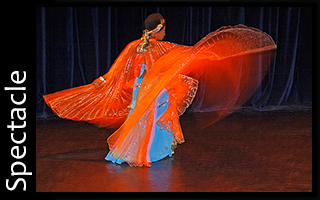
<style>
.page{position:relative;width:320px;height:200px}
.page>*{position:absolute;margin:0}
.t1{font:30px "Candara";color:#ffffff}
</style>
<div class="page">
<p class="t1" style="left:4px;top:71px;width:28px;height:120px;rotate:-90deg">Spectacle</p>
</div>
